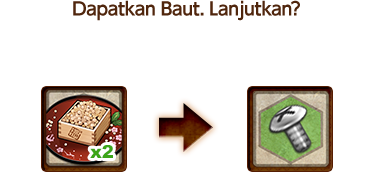
<style>
.page{position:relative;width:372px;height:172px;background:#ffffff}
.page>*{position:absolute;margin:0}
.t1{font:18px "UDShinGoPro-DeBold";letter-spacing:-0.04em;color:#50260d}
</style>
<div class="page">
<p class="t1" style="left:73px;top:0px;width:227px;height:21px">Dapatkan Baut. Lanjutkan?</p>
</div>
